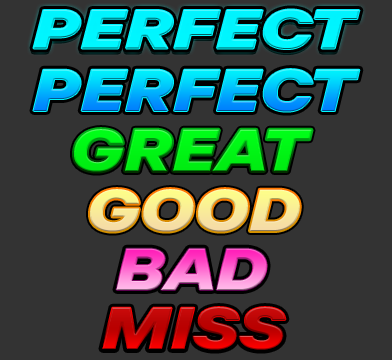
<style>
.page{position:relative;width:392px;height:360px;background:#333333}
.page>*{position:absolute;margin:0}
.t1{font:54.9px "TTInterphasesProTrl-XBdIt";color:#00f5fe;scale:1.33 1}
.t2{font:58.9px "TTInterphasesProTrl-XBdIt";scale:1.24 1}
.t3{font:58.9px "TTInterphasesProTrl-XBdIt";color:#00f415;scale:1.24 1}
.t4{font:58.9px "TTInterphasesProTrl-XBdIt";color:#f9ea98;scale:1.24 1}
</style>
<div class="page">
<p class="t1" style="left:33px;top:9px;width:327px;height:40px">PERFECT</p>
<p class="t2" style="left:33px;top:69px;width:327px;height:43px">PERFECT</p>
<p class="t3" style="left:74px;top:129px;width:238px;height:43px">GREAT</p>
<p class="t4" style="left:90px;top:189px;width:210px;height:43px">GOOD</p>
<p class="t2" style="left:116px;top:248px;width:151px;height:42px">BAD</p>
<p class="t2" style="left:102px;top:307px;width:184px;height:43px">MISS</p>
</div>
